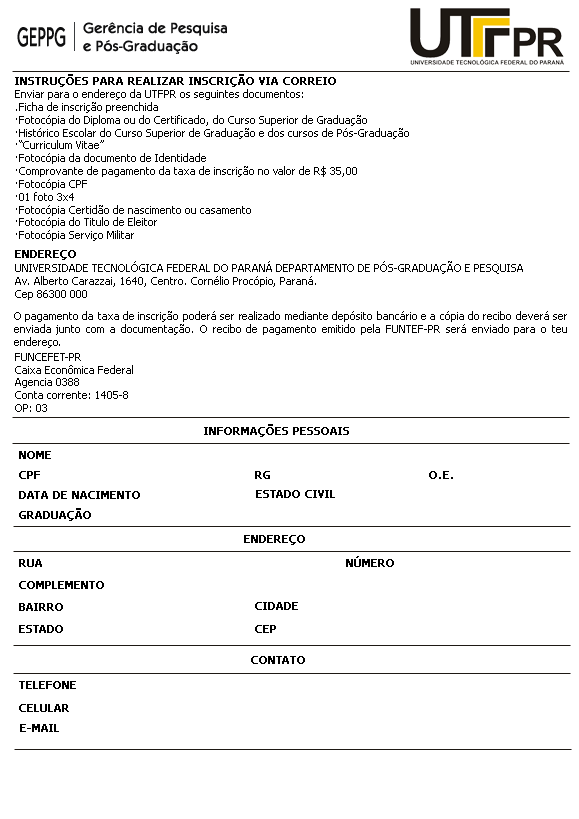
<style>
.page{position:relative;width:579px;height:819px;background:#ffffff}
.page>*{position:absolute;margin:0}
.t1{font:27.5px "KabobRegular";color:#0e0e0f;scale:0.58 1}
.t2{font:15px "KabobRegular";color:#0e0e0f}
.t3{font:10.7px "Tahoma";color:#000000;font-weight:bold}
.t4{font:10.7px "Tahoma";color:#000000}
</style>
<div class="page">
<p class="t1" style="left:17px;top:27px;width:49px;height:20px">GEPPG</p>
<p class="t2" style="left:83px;top:22px;width:144px;height:32px">Gerência de Pesquisa <br>e Pós-Graduação</p>
<p class="t3" style="left:15px;top:74px;width:321px;height:13px">INSTRUÇÕES PARA REALIZAR INSCRIÇÃO VIA CORREIO</p>
<p class="t4" style="left:15px;top:89px;width:394px;height:152px">Enviar para o endereço da UTFPR os seguintes documentos: <br>.Ficha de inscrição preenchida<br>·Fotocópia do Diploma ou do Certificado, do Curso Superior de Graduação <br>·Histórico Escolar do Curso Superior de Graduação e dos cursos de Pós-Graduação <br>·“Curriculum Vitae” <br>·Fotocópia da documento de Identidade <br>·Comprovante de pagamento da taxa de inscrição no valor de R$ 35,00<br>·Fotocópia CPF <br>·01 foto 3x4 <br>·Fotocópia Certidão de nascimento ou casamento <br>·Fotocópia do Titulo de Eleitor <br>·Fotocópia Serviço Militar</p>
<p class="t3" style="left:15px;top:250px;width:61px;height:10px">ENDEREÇO</p>
<p class="t4" style="left:15px;top:261px;width:508px;height:39px">UNIVERSIDADE TECNOLÓGICA FEDERAL DO PARANÁ DEPARTAMENTO DE PÓS-GRADUAÇÃO E PESQUISA <br>Av. Alberto Carazzai, 1640, Centro. Cornélio Procópio, Paraná. <br>Cep 86300 000</p>
<p class="t4" style="left:14px;top:311px;width:553px;height:37px;text-align:justify">O pagamento da taxa de inscrição poderá ser realizado mediante depósito bancário e a cópia do recibo deverá ser enviada junto com a documentação. O recibo de pagamento emitido pela FUNTEF-PR será enviado para o teu endereço.</p>
<p class="t4" style="left:15px;top:353px;width:118px;height:59px">FUNCEFET-PR <br>Caixa Econômica Federal <br>Agencia 0388 <br>Conta corrente: 1405-8 <br>OP: 03</p>
<p class="t3" style="left:204px;top:424px;width:145px;height:13px">INFORMAÇÕES PESSOAIS</p>
<p class="t3" style="left:19px;top:451px;width:32px;height:8px">NOME</p>
<p class="t3" style="left:19px;top:471px;width:21px;height:8px">CPF</p>
<p class="t3" style="left:255px;top:471px;width:15px;height:8px">RG</p>
<p class="t3" style="left:429px;top:471px;width:24px;height:8px">O.E.</p>
<p class="t3" style="left:19px;top:491px;width:121px;height:8px">DATA DE NACIMENTO</p>
<p class="t3" style="left:256px;top:490px;width:79px;height:8px">ESTADO CIVIL</p>
<p class="t3" style="left:19px;top:508px;width:72px;height:13px">GRADUAÇÃO</p>
<p class="t3" style="left:244px;top:535px;width:61px;height:10px">ENDEREÇO</p>
<p class="t3" style="left:346px;top:556px;width:48px;height:11px">NÚMERO</p>
<p class="t3" style="left:19px;top:559px;width:23px;height:8px">RUA</p>
<p class="t3" style="left:19px;top:581px;width:85px;height:8px">COMPLEMENTO</p>
<p class="t3" style="left:19px;top:603px;width:44px;height:8px">BAIRRO</p>
<p class="t3" style="left:255px;top:602px;width:43px;height:8px">CIDADE</p>
<p class="t3" style="left:19px;top:625px;width:44px;height:8px">ESTADO</p>
<p class="t3" style="left:255px;top:625px;width:21px;height:8px">CEP</p>
<p class="t3" style="left:251px;top:656px;width:54px;height:8px">CONTATO</p>
<p class="t3" style="left:19px;top:681px;width:57px;height:8px">TELEFONE</p>
<p class="t3" style="left:19px;top:704px;width:50px;height:8px">CELULAR</p>
<p class="t3" style="left:20px;top:724px;width:39px;height:8px">E-MAIL</p>
</div>
